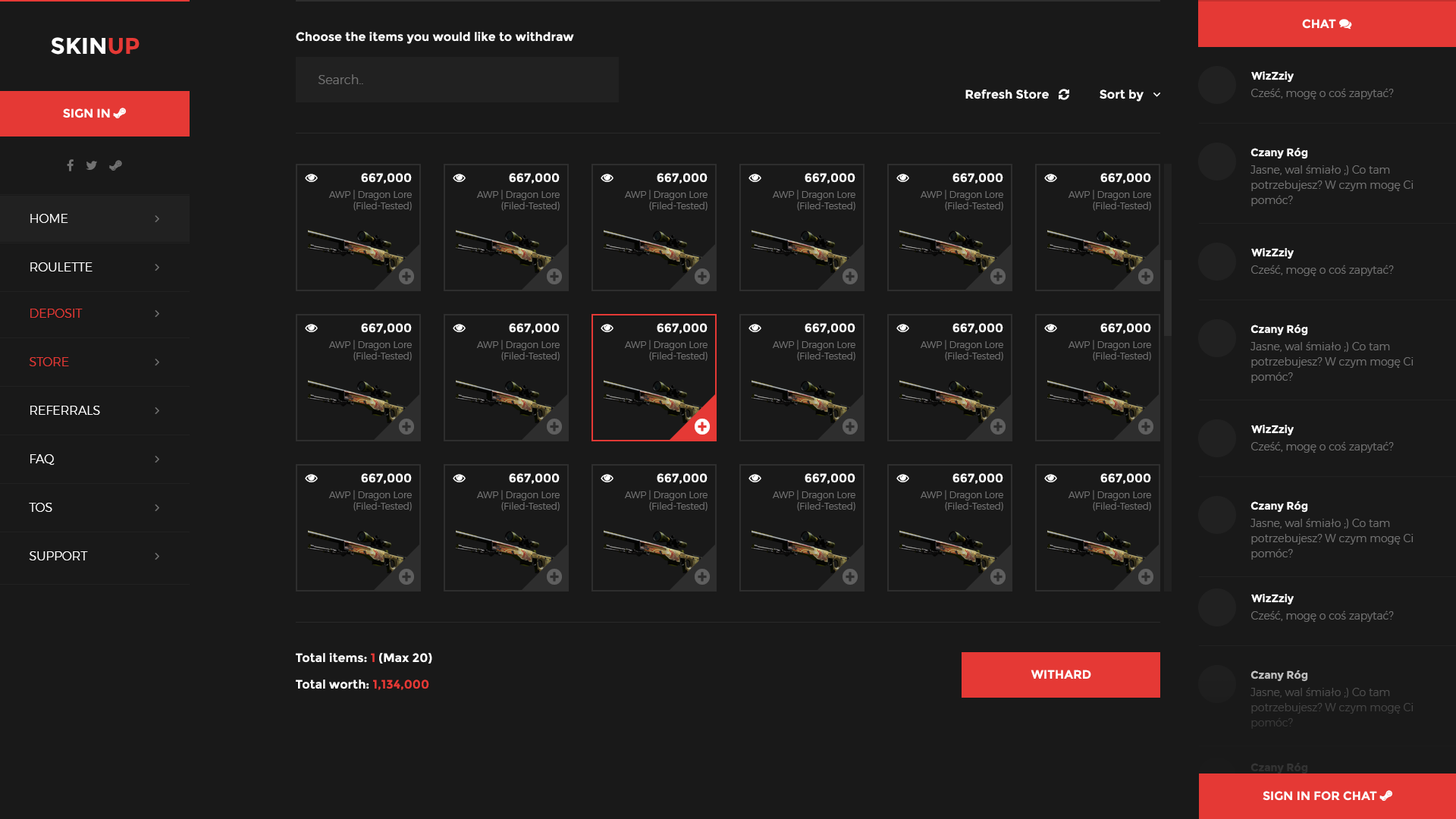
<style>
.page{position:relative;width:1456px;height:819px;background:#191919}
.page>*{position:absolute;margin:0}
.t1{font:22.7px "Montserrat-Bold";color:#fefefe}
.t2{font:22.7px "Montserrat-Bold";color:#e53935}
.t3{font:12.1px "Montserrat-Bold";color:#fefefe}
.t4{font:12.1px "Montserrat-Light";color:#717171}
.t5{font:10.7px "Montserrat-Bold";color:#fefefe}
.t6{font:10.7px "Montserrat-Light";color:#717171}
.t7{font:10.7px/15.2px "Montserrat-Light";color:#717171}
.t8{font:9.1px/11.4px "Montserrat-Light";color:#717171}
.t9{font:12.1px "Montserrat-Light";color:#fefefe}
.t10{font:12.1px "Montserrat-Light";color:#e53935}
.t11{font:12.1px "Montserrat-Light";color:#ffffff}
.t12{font:12.1px/26.5px "Montserrat-Bold";color:#fefefe}
.t13{font:12.1px/26.5px "Montserrat-Bold";color:#e53935}
.t14{font:10.7px "Montserrat-Bold";color:#bfbfbf}
.t15{font:10.7px/15.2px "Montserrat-Light";color:#444444}
.t16{font:10.7px "Montserrat-Bold";color:#323232}
</style>
<div class="page">
<p class="t1" style="left:51px;top:37px;width:89px;height:18px">SKIN<span class="t2">UP</span></p>
<p class="t3" style="left:296px;top:32px;width:278px;height:12px">Choose the items you would like to withdraw</p>
<p class="t4" style="left:318px;top:74px;width:45px;height:10px">Search..</p>
<p class="t5" style="left:1251px;top:71px;width:43px;height:12px">WizZziy</p>
<p class="t6" style="left:1251px;top:88px;width:143px;height:11px">Cześć, mogę o coś zapytać?</p>
<p class="t5" style="left:1250px;top:147px;width:58px;height:12px">Czany Róg</p>
<p class="t3" style="left:361px;top:173px;width:51px;height:11px">667,000</p>
<p class="t3" style="left:509px;top:173px;width:51px;height:11px">667,000</p>
<p class="t3" style="left:657px;top:173px;width:51px;height:11px">667,000</p>
<p class="t3" style="left:805px;top:173px;width:50px;height:11px">667,000</p>
<p class="t3" style="left:952px;top:173px;width:51px;height:11px">667,000</p>
<p class="t3" style="left:1100px;top:173px;width:51px;height:11px">667,000</p>
<p class="t7" style="left:1250px;top:165px;width:164px;height:41px">Jasne, wal śmiało ;) Co tam <br>potrzebujesz? W czym mogę Ci<br>pomóc?</p>
<p class="t8" style="left:328px;top:190px;width:84px;height:21px;text-align:right">AWP | Dragon Lore<br>(Filed-Tested)</p>
<p class="t8" style="left:476px;top:190px;width:84px;height:21px;text-align:right">AWP | Dragon Lore<br>(Filed-Tested)</p>
<p class="t8" style="left:624px;top:190px;width:84px;height:21px;text-align:right">AWP | Dragon Lore<br>(Filed-Tested)</p>
<p class="t8" style="left:772px;top:190px;width:83px;height:21px;text-align:right">AWP | Dragon Lore<br>(Filed-Tested)</p>
<p class="t8" style="left:920px;top:190px;width:83px;height:21px;text-align:right">AWP | Dragon Lore<br>(Filed-Tested)</p>
<p class="t8" style="left:1068px;top:190px;width:83px;height:21px;text-align:right">AWP | Dragon Lore<br>(Filed-Tested)</p>
<p class="t9" style="left:30px;top:214px;width:38px;height:9px">HOME</p>
<p class="t5" style="left:1251px;top:248px;width:43px;height:11px">WizZziy</p>
<p class="t9" style="left:30px;top:262px;width:63px;height:9px">ROULETTE</p>
<p class="t6" style="left:1251px;top:265px;width:143px;height:11px">Cześć, mogę o coś zapytać?</p>
<p class="t10" style="left:30px;top:309px;width:53px;height:9px">DEPOSIT</p>
<p class="t3" style="left:361px;top:323px;width:51px;height:11px">667,000</p>
<p class="t3" style="left:509px;top:323px;width:51px;height:11px">667,000</p>
<p class="t3" style="left:657px;top:323px;width:51px;height:11px">667,000</p>
<p class="t3" style="left:805px;top:323px;width:50px;height:11px">667,000</p>
<p class="t3" style="left:952px;top:323px;width:51px;height:11px">667,000</p>
<p class="t3" style="left:1100px;top:323px;width:51px;height:11px">667,000</p>
<p class="t5" style="left:1250px;top:324px;width:58px;height:12px">Czany Róg</p>
<p class="t8" style="left:328px;top:340px;width:84px;height:21px;text-align:right">AWP | Dragon Lore<br>(Filed-Tested)</p>
<p class="t8" style="left:476px;top:340px;width:84px;height:21px;text-align:right">AWP | Dragon Lore<br>(Filed-Tested)</p>
<p class="t8" style="left:624px;top:340px;width:84px;height:21px;text-align:right">AWP | Dragon Lore<br>(Filed-Tested)</p>
<p class="t8" style="left:772px;top:340px;width:83px;height:21px;text-align:right">AWP | Dragon Lore<br>(Filed-Tested)</p>
<p class="t8" style="left:920px;top:340px;width:83px;height:21px;text-align:right">AWP | Dragon Lore<br>(Filed-Tested)</p>
<p class="t8" style="left:1068px;top:340px;width:83px;height:21px;text-align:right">AWP | Dragon Lore<br>(Filed-Tested)</p>
<p class="t7" style="left:1250px;top:341px;width:164px;height:42px">Jasne, wal śmiało ;) Co tam <br>potrzebujesz? W czym mogę Ci<br>pomóc?</p>
<p class="t10" style="left:29px;top:357px;width:40px;height:9px">STORE</p>
<p class="t11" style="left:30px;top:406px;width:70px;height:9px">REFERRALS</p>
<p class="t5" style="left:1251px;top:425px;width:43px;height:11px">WizZziy</p>
<p class="t6" style="left:1251px;top:441px;width:143px;height:12px">Cześć, mogę o coś zapytać?</p>
<p class="t11" style="left:30px;top:454px;width:25px;height:11px">FAQ</p>
<p class="t3" style="left:361px;top:473px;width:51px;height:11px">667,000</p>
<p class="t3" style="left:509px;top:473px;width:51px;height:11px">667,000</p>
<p class="t3" style="left:657px;top:473px;width:51px;height:11px">667,000</p>
<p class="t3" style="left:805px;top:473px;width:50px;height:11px">667,000</p>
<p class="t3" style="left:952px;top:473px;width:51px;height:11px">667,000</p>
<p class="t3" style="left:1100px;top:473px;width:51px;height:11px">667,000</p>
<p class="t8" style="left:328px;top:490px;width:84px;height:21px;text-align:right">AWP | Dragon Lore<br>(Filed-Tested)</p>
<p class="t8" style="left:476px;top:490px;width:84px;height:21px;text-align:right">AWP | Dragon Lore<br>(Filed-Tested)</p>
<p class="t8" style="left:624px;top:490px;width:84px;height:21px;text-align:right">AWP | Dragon Lore<br>(Filed-Tested)</p>
<p class="t8" style="left:772px;top:490px;width:83px;height:21px;text-align:right">AWP | Dragon Lore<br>(Filed-Tested)</p>
<p class="t8" style="left:920px;top:490px;width:83px;height:21px;text-align:right">AWP | Dragon Lore<br>(Filed-Tested)</p>
<p class="t8" style="left:1068px;top:490px;width:83px;height:21px;text-align:right">AWP | Dragon Lore<br>(Filed-Tested)</p>
<p class="t11" style="left:29px;top:503px;width:23px;height:9px">TOS</p>
<p class="t5" style="left:1250px;top:500px;width:58px;height:13px">Czany Róg</p>
<p class="t7" style="left:1250px;top:518px;width:164px;height:42px">Jasne, wal śmiało ;) Co tam <br>potrzebujesz? W czym mogę Ci<br>pomóc?</p>
<p class="t11" style="left:29px;top:551px;width:59px;height:9px">SUPPORT</p>
<p class="t5" style="left:1251px;top:594px;width:43px;height:11px">WizZziy</p>
<p class="t6" style="left:1251px;top:610px;width:143px;height:12px">Cześć, mogę o coś zapytać?</p>
<p class="t12" style="left:296px;top:653px;width:136px;height:37px">Total items: <span class="t13">1</span> (Max 20)<br>Total worth: <span class="t13">1,134,000</span></p>
<p class="t3" style="left:1031px;top:670px;width:60px;height:9px">WITHARD</p>
<p class="t14" style="left:1250px;top:670px;width:58px;height:12px">Czany Róg</p>
<p class="t15" style="left:1250px;top:687px;width:164px;height:42px">Jasne, wal śmiało ;) Co tam <br>potrzebujesz? W czym mogę Ci<br>pomóc?</p>
<p class="t16" style="left:1250px;top:762px;width:58px;height:12px">Czany Róg</p>
</div>
